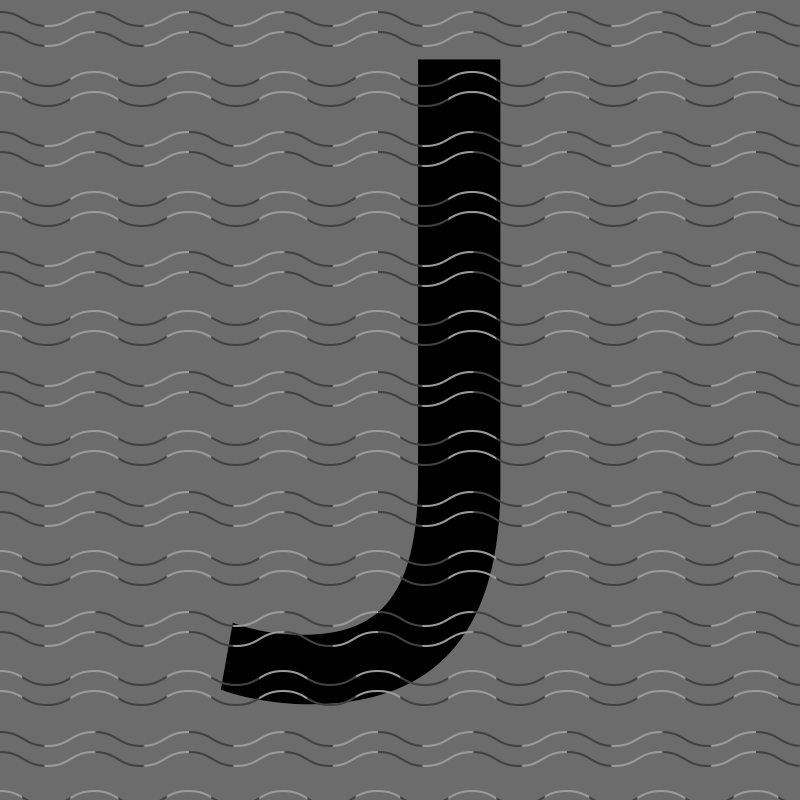
<style>
.page{position:relative;width:800px;height:800px;background:#6c6c6c}
.page>*{position:absolute;margin:0}
.t1{font:941.7px "MyriadConceptRoman-Regular";color:#000000}
</style>
<div class="page">
<p class="t1" style="left:220px;top:59px;width:281px;height:646px">J</p>
</div>
